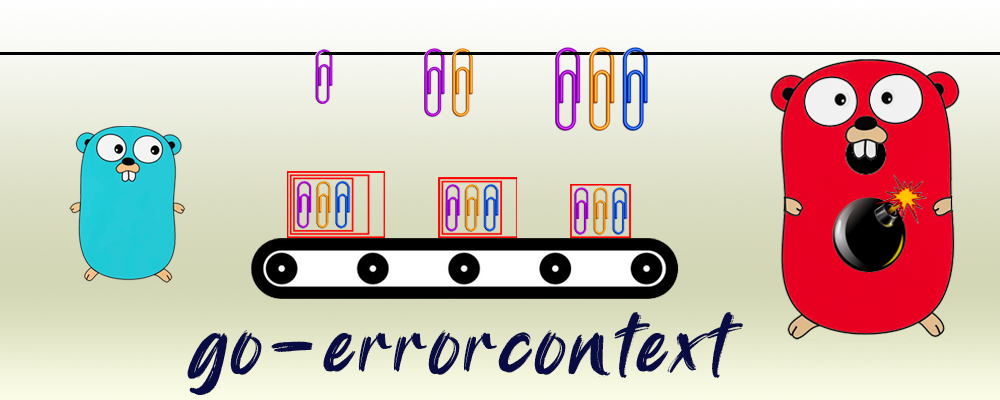
<style>
.page{position:relative;width:1000px;height:400px}
.page>*{position:absolute;margin:0}
.t1{font:86.3px "Golang";letter-spacing:0.045em;color:#080c42;font-style:italic}
</style>
<div class="page">
<p class="t1" style="left:187px;top:312px;width:556px;height:83px">go-errorcontext</p>
</div>
